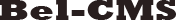
<style>
.page{position:relative;width:177px;height:20px;background:#281e1e}
.page>*{position:absolute;margin:0}
.t1{font:28.6px "Rockwell-ExtraBold";color:#281e1e;scale:1.27 1}
</style>
<div class="page">
<p class="t1" style="left:0px;top:0px;width:176px;height:20px">Bel-CMS</p>
</div>
